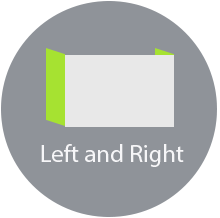
<style>
.page{position:relative;width:220px;height:218px;background:#8f9399}
.page>*{position:absolute;margin:0}
.t1{font:24.7px "MyriadPro-Regular";color:#f6f6f8}
</style>
<div class="page">
<p class="t1" style="left:41px;top:144px;width:143px;height:23px">Left and Right</p>
</div>
